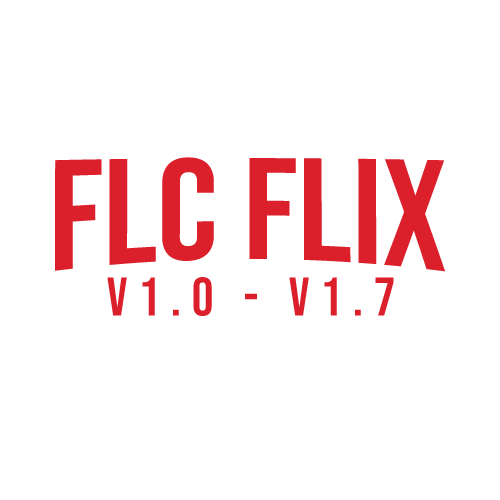
<style>
.page{position:relative;width:500px;height:500px;background:#ffffff}
.page>*{position:absolute;margin:0}
.t1{font:158.3px "BebasNeue-Regular";color:#db202c}
.t2{font:54.2px "BebasNeue-Regular";letter-spacing:0.2em;color:#db202c}
</style>
<div class="page">
<p class="t1" style="left:55px;top:157px;width:390px;height:115px">FLC Flix</p>
<p class="t2" style="left:107px;top:277px;width:287px;height:39px">V1.0 - V1.7</p>
</div>
